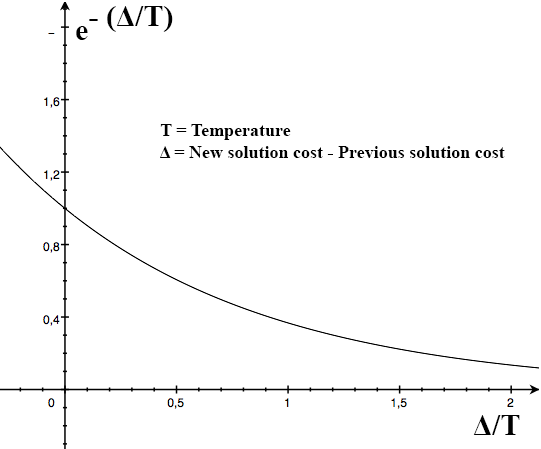
<style>
.page{position:relative;width:541px;height:449px;background:#ffffff}
.page>*{position:absolute;margin:0}
.t1{font:30px "TimesNewRomanPS-BoldMT";color:#000000}
.t2{font:18px "TimesNewRomanPS-BoldMT";color:#000000}
</style>
<div class="page">
<p class="t1" style="left:89px;top:6px;width:84px;height:26px">- (Δ/T)</p>
<p class="t1" style="left:76px;top:26px;width:12px;height:14px">e</p>
<p class="t2" style="left:160px;top:124px;width:345px;height:34px">T = Temperature<br>   Δ = New solution cost - Previous solution cost</p>
<p class="t1" style="left:473px;top:415px;width:47px;height:20px">Δ/T</p>
</div>
